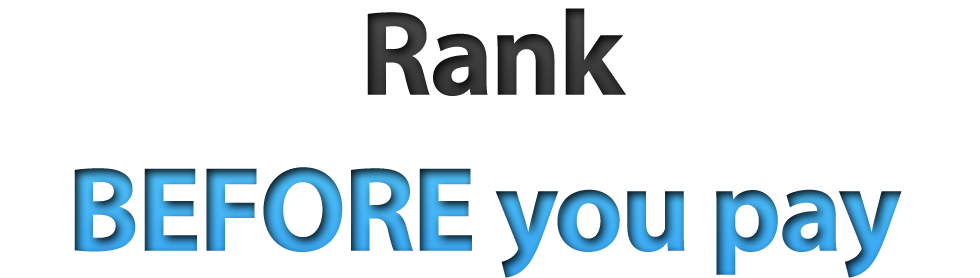
<style>
.page{position:relative;width:980px;height:278px;background:#ffffff}
.page>*{position:absolute;margin:0}
.t1{font:121.1px "MyriadPro-Bold";letter-spacing:-0.025em;color:#404040}
.t2{font:121.1px "MyriadPro-Bold";letter-spacing:-0.025em}
</style>
<div class="page">
<p class="t1" style="left:367px;top:8px;width:259px;height:88px">Rank</p>
<p class="t2" style="left:74px;top:167px;width:828px;height:111px">BEFORE you pay</p>
</div>
